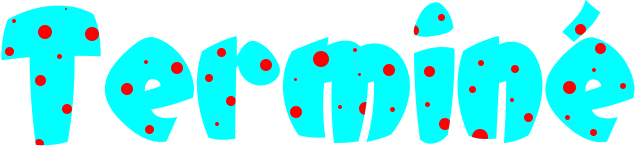
<style>
.page{position:relative;width:636px;height:146px;background:#ffffff}
.page>*{position:absolute;margin:0}
.t1{font:171px "DCC-Dreamer";color:#00ffff}
</style>
<div class="page">
<p class="t1" style="left:1px;top:0px;width:634px;height:146px">Terminé</p>
</div>
